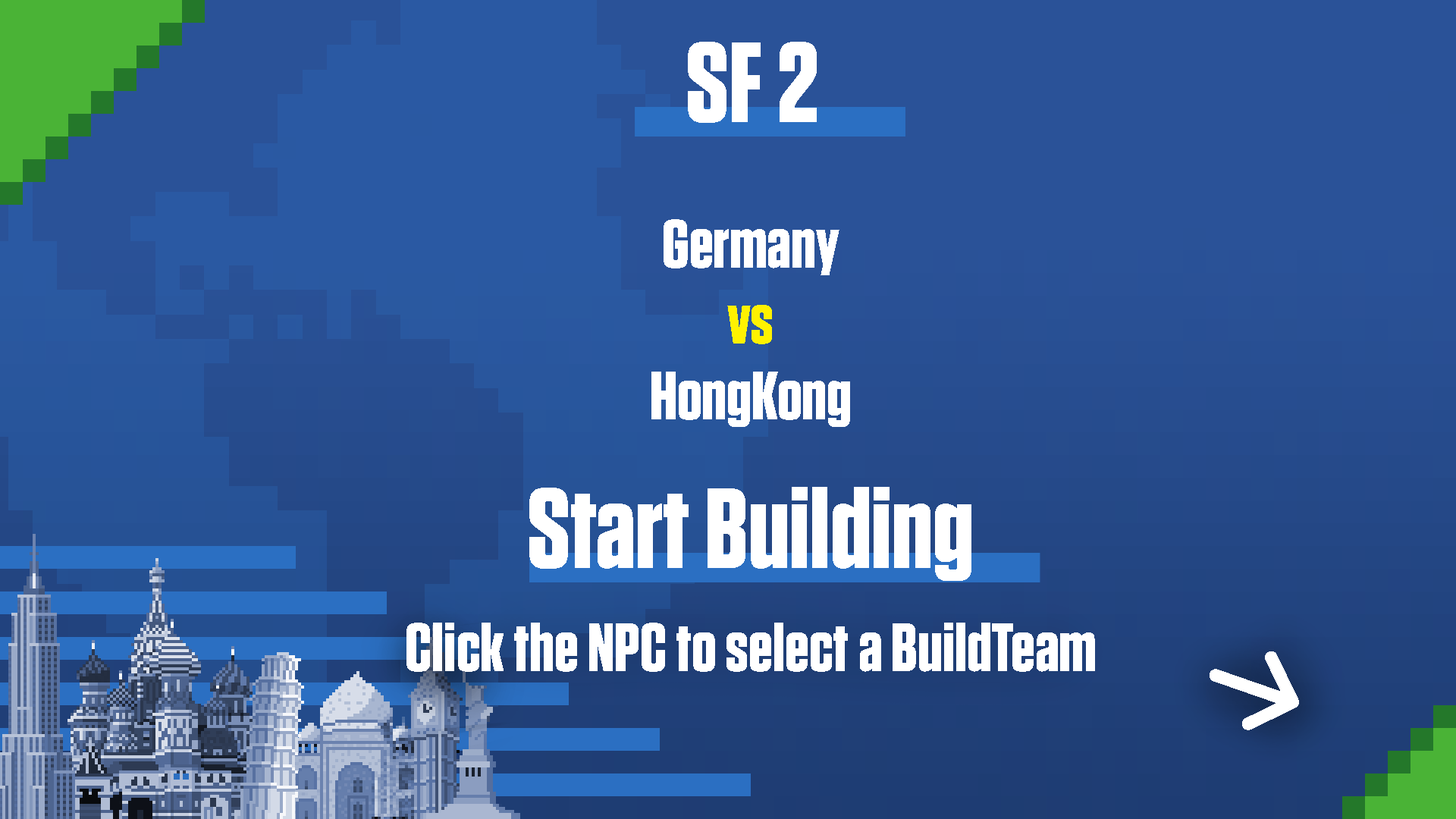
<style>
.page{position:relative;width:1456px;height:819px}
.page>*{position:absolute;margin:0}
.t1{font:113.7px "Tungsten-Bold";color:#ffffff}
.t2{font:68.2px/75.8px "Tungsten-Bold";color:#ffffff}
.t3{font:68.2px/75.8px "Tungsten-Bold";color:#fff200}
.t4{font:68.2px "Tungsten-Bold";color:#ffffff}
</style>
<div class="page">
<p class="t1" style="left:688px;top:42px;width:129px;height:81px">SF 2</p>
<p class="t2" style="left:651px;top:219px;width:199px;height:208px;text-align:center">Germany<br> <span class="t3">vs <br></span>HongKong</p>
<p class="t1" style="left:529px;top:487px;width:442px;height:94px">Start Building</p>
<p class="t4" style="left:406px;top:623px;width:689px;height:49px">Click the NPC to select a BuildTeam</p>
</div>
